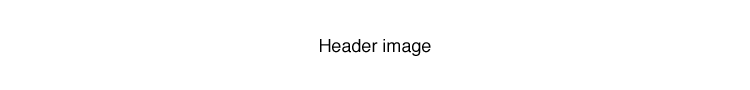
<style>
.page{position:relative;width:750px;height:90px;background:#ffffff}
.page>*{position:absolute;margin:0}
.t1{font:18px "Helvetica";color:#000000}
</style>
<div class="page">
<p class="t1" style="left:320px;top:39px;width:111px;height:17px">Header image</p>
</div>
